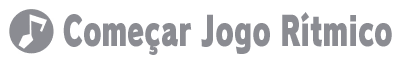
<style>
.page{position:relative;width:400px;height:64px;background:#ffffff}
.page>*{position:absolute;margin:0}
.t1{font:40px "RodinPro-UB";color:#8b8c92;scale:0.68 1}
</style>
<div class="page">
<p class="t1" style="left:63px;top:12px;width:329px;height:43px">Começar Jogo Rítmico</p>
</div>
